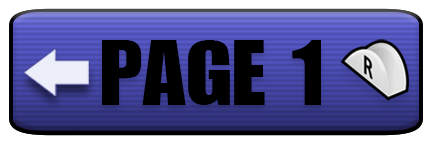
<style>
.page{position:relative;width:432px;height:144px}
.page>*{position:absolute;margin:0}
.t1{font:89px "Genuine";color:#000000;text-transform:uppercase;scale:1.07 1}
</style>
<div class="page">
<p class="t1" style="left:102px;top:40px;width:219px;height:65px">Page 1</p>
</div>
